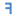
<style>
.page{position:relative;width:16px;height:16px;background:#ffffff}
.page>*{position:absolute;margin:0}
.t1{font:15.9px "JostRoman-Medium";letter-spacing:0.2em;color:#4786c6}
</style>
<div class="page">
<p class="t1" style="left:5px;top:2px;width:7px;height:13px;rotate:180deg">F</p>
</div>
